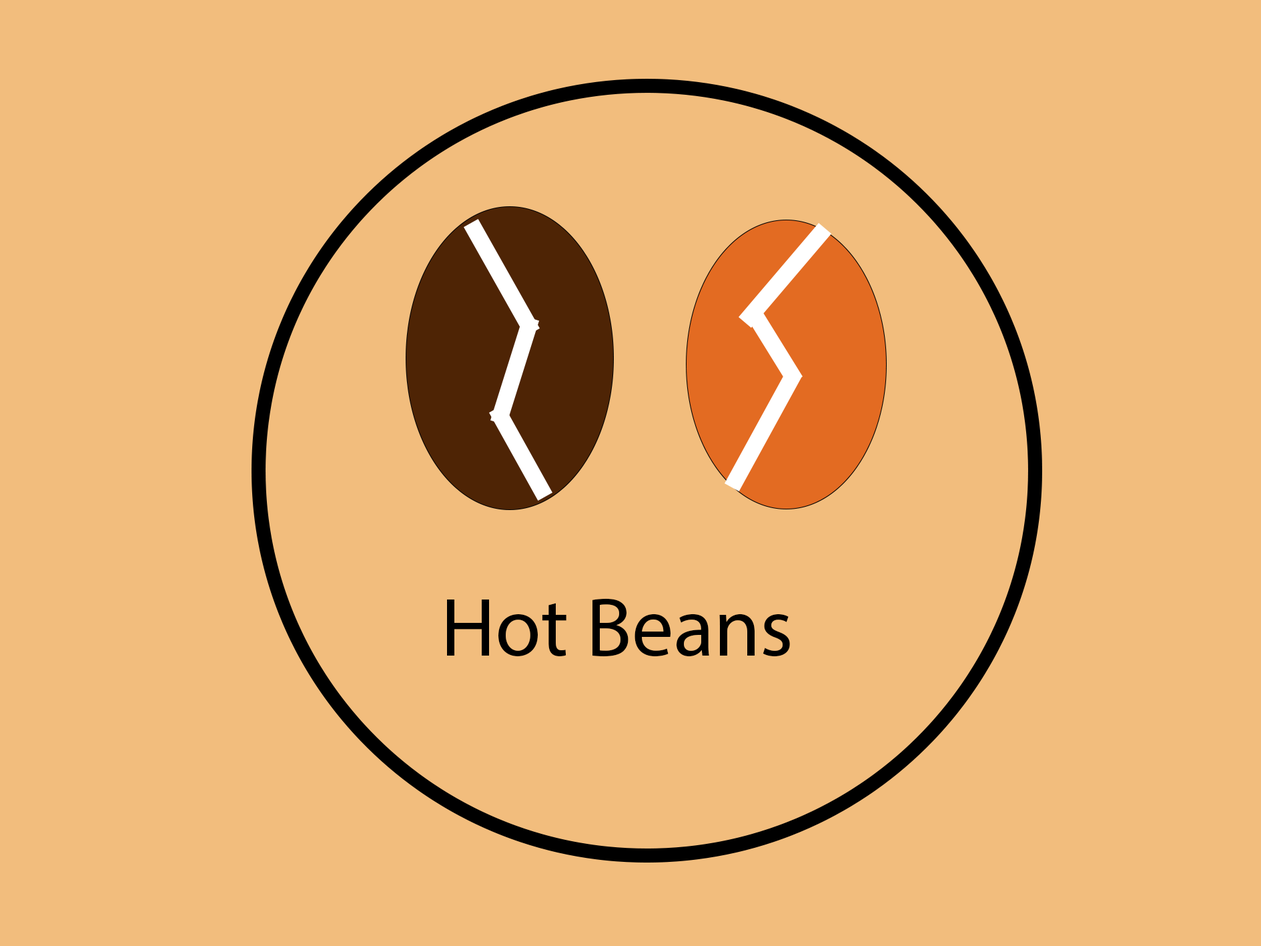
<style>
.page{position:relative;width:1261px;height:946px;background:#f2bd7d}
.page>*{position:absolute;margin:0}
.t1{font:83.4px "MyriadPro-Regular";color:#000000}
</style>
<div class="page">
<p class="t1" style="left:447px;top:598px;width:343px;height:59px">Hot Beans</p>
</div>
